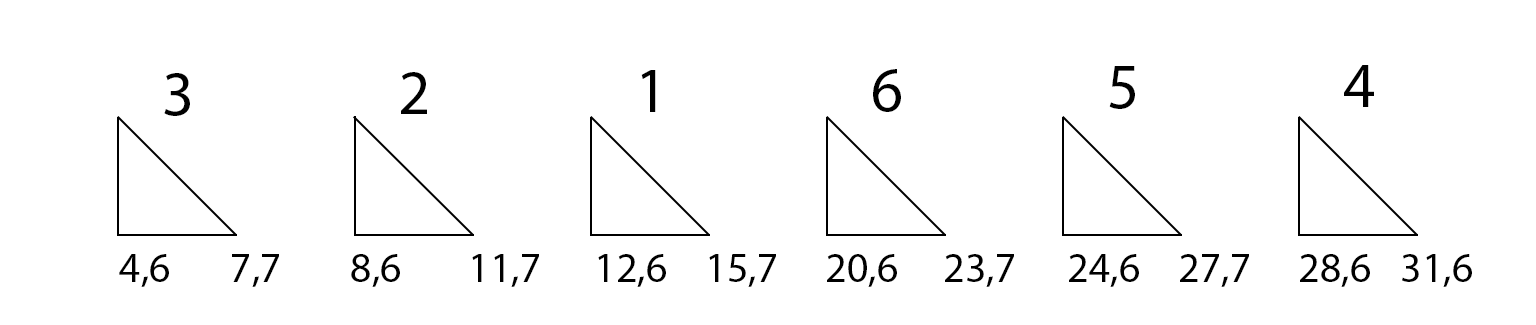
<style>
.page{position:relative;width:1536px;height:325px;background:#ffffff}
.page>*{position:absolute;margin:0}
.t1{font:63px "MyriadPro-Regular";color:#000000}
.t2{font:41.7px "MyriadPro-Regular";color:#000000}
</style>
<div class="page">
<p class="t1" style="left:1344px;top:65px;width:30px;height:42px">4</p>
<p class="t1" style="left:164px;top:73px;width:26px;height:43px">3</p>
<p class="t1" style="left:401px;top:72px;width:26px;height:42px">2</p>
<p class="t1" style="left:641px;top:70px;width:15px;height:42px">1</p>
<p class="t1" style="left:873px;top:69px;width:28px;height:43px">6</p>
<p class="t1" style="left:1109px;top:66px;width:26px;height:43px">5</p>
<p class="t2" style="left:119px;top:254px;width:50px;height:33px">4,6</p>
<p class="t2" style="left:232px;top:254px;width:47px;height:33px">7,7</p>
<p class="t2" style="left:351px;top:254px;width:49px;height:33px">8,6</p>
<p class="t2" style="left:472px;top:254px;width:67px;height:33px">11,7</p>
<p class="t2" style="left:598px;top:254px;width:68px;height:33px">12,6</p>
<p class="t2" style="left:709px;top:254px;width:67px;height:33px">15,7</p>
<p class="t2" style="left:827px;top:254px;width:70px;height:33px">20,6</p>
<p class="t2" style="left:945px;top:254px;width:69px;height:33px">23,7</p>
<p class="t2" style="left:1069px;top:254px;width:70px;height:33px">24,6</p>
<p class="t2" style="left:1180px;top:254px;width:69px;height:33px">27,7</p>
<p class="t2" style="left:1300px;top:254px;width:70px;height:33px">28,6</p>
<p class="t2" style="left:1402px;top:254px;width:70px;height:33px">31,6</p>
</div>
